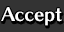
<style>
.page{position:relative;width:64px;height:32px;background:#333333}
.page>*{position:absolute;margin:0}
.t1{font:18px "ChiaroStd-B";color:#ffffff}
</style>
<div class="page">
<p class="t1" style="left:1px;top:7px;width:61px;height:19px">Accept</p>
</div>
